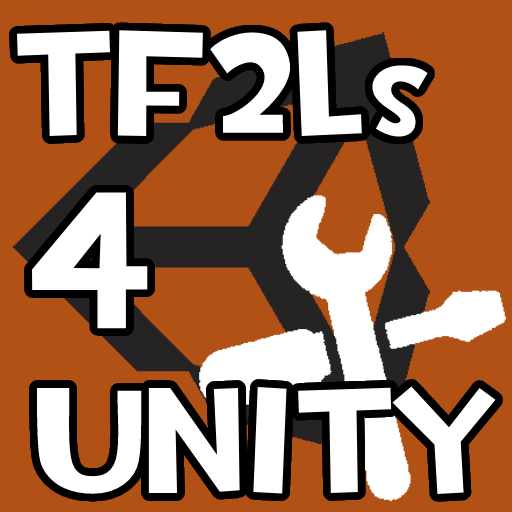
<style>
.page{position:relative;width:512px;height:512px;background:#b15115}
.page>*{position:absolute;margin:0}
.t1{font:150px "TF2Build";color:#ffffff}
.t2{font:100px "TF2Build";color:#ffffff}
.t3{font:202px "TF2Build";color:#ffffff}
</style>
<div class="page">
<p class="t1" style="left:17px;top:30px;width:411px;height:107px">TF2L<span class="t2">s</span></p>
<p class="t3" style="left:32px;top:192px;width:116px;height:137px">4</p>
<p class="t1" style="left:36px;top:386px;width:460px;height:108px">Unity</p>
</div>
